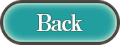
<style>
.page{position:relative;width:120px;height:45px}
.page>*{position:absolute;margin:0}
.t1{font:22px "RyuminPro-ExBold";letter-spacing:-0.08em;color:#fdfbf9}
</style>
<div class="page">
<p class="t1" style="left:36px;top:14px;width:47px;height:17px">Back</p>
</div>
